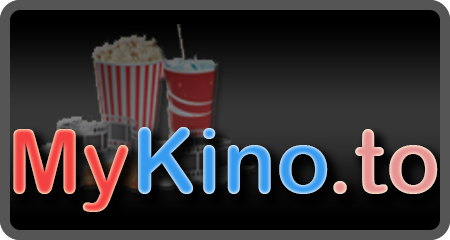
<style>
.page{position:relative;width:450px;height:240px}
.page>*{position:absolute;margin:0}
.t1{font:90px "ArialRoundedMTBold"}
</style>
<div class="page">
<p class="t1" style="left:13px;top:127px;width:425px;height:85px">MyKino.to</p>
</div>
